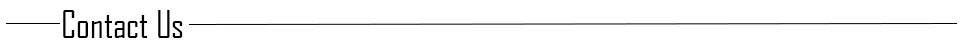
<style>
.page{position:relative;width:960px;height:49px;background:#ffffff}
.page>*{position:absolute;margin:0}
.t1{font:36px "AgencyFB-Reg";color:#000000}
</style>
<div class="page">
<p class="t1" style="left:63px;top:10px;width:120px;height:28px">Contact Us</p>
</div>
